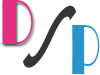
<style>
.page{position:relative;width:100px;height:75px;background:#ffffff}
.page>*{position:absolute;margin:0}
.t1{font:65.9px "Broadway";color:#e52e80;scale:0.68 1}
.t2{font:95.5px "GillSansMT-ExtraCondensedBold";color:#353636;scale:0.64 1}
.t3{font:73.9px "Broadway";color:#2a93ca;scale:0.54 1}
</style>
<div class="page">
<p class="t1" style="left:2px;top:0px;width:31px;height:44px">D</p>
<p class="t2" style="left:23px;top:5px;width:53px;height:63px;rotate:53deg">S</p>
<p class="t3" style="left:72px;top:25px;width:28px;height:49px">P</p>
</div>
